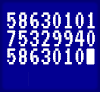
<style>
.page{position:relative;width:100px;height:92px;background:#030092}
.page>*{position:absolute;margin:0}
.t1{font:27px/18px "VT323-Regular";letter-spacing:0.005em;color:#ffffff}
</style>
<div class="page">
<p class="t1" style="left:7px;top:12px;width:88px;height:53px">58630101<br>75329940<br>5863010</p>
</div>
